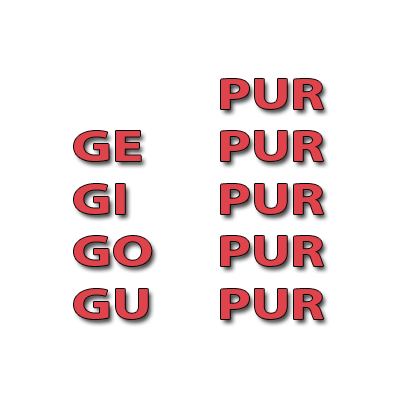
<style>
.page{position:relative;width:400px;height:400px;background:#ffffff}
.page>*{position:absolute;margin:0}
.t1{font:43.8px "MyriadPro-Bold";color:#df444c;scale:1.32 1}
</style>
<div class="page">
<p class="t1" style="left:74px;top:79px;width:250px;height:240px;text-align:center">PUR<br>GE    PUR<br>GI     PUR<br>GO   PUR<br>GU   PUR</p>
</div>
